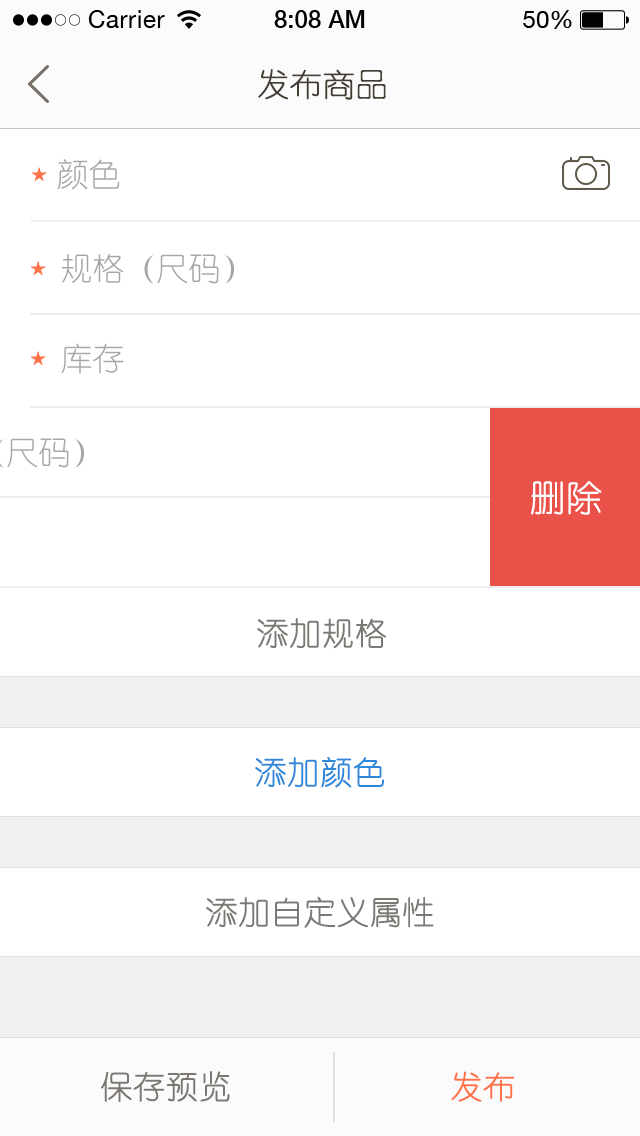
<style>
.page{position:relative;width:640px;height:1136px;background:#ffffff}
.page>*{position:absolute;margin:0}
.t1{font:32px "YouYuan";color:#433d33;text-transform:uppercase;font-weight:bold}
.t2{font:32px "YouYuan";color:#a7a6a3;text-transform:uppercase}
.t3{font:36px "YouYuan";color:#ffffff;text-transform:uppercase;font-weight:bold}
.t4{font:32px "YouYuan";color:#7b7973;text-transform:uppercase;font-weight:bold}
.t5{font:32px "YouYuan";color:#2f88da;text-transform:uppercase;font-weight:bold}
.t6{font:32px "YouYuan";color:#7a7772;text-transform:uppercase;font-weight:bold}
.t7{font:32px "YouYuan";color:#ff7248;text-transform:uppercase;font-weight:bold}
</style>
<div class="page">
<p class="t1" style="left:258px;top:69px;width:128px;height:31px">发布商品</p>
<p class="t2" style="left:57px;top:159px;width:63px;height:31px">颜色</p>
<p class="t2" style="left:61px;top:254px;width:173px;height:30px">规格（尺码）</p>
<p class="t2" style="left:61px;top:343px;width:63px;height:31px">库存</p>
<p class="t3" style="left:531px;top:481px;width:71px;height:34px">删除</p>
<p class="t4" style="left:257px;top:618px;width:129px;height:31px">添加规格</p>
<p class="t5" style="left:255px;top:757px;width:129px;height:31px">添加颜色</p>
<p class="t4" style="left:206px;top:896px;width:228px;height:32px">添加自定义属性</p>
<p class="t6" style="left:101px;top:1071px;width:129px;height:31px">保存预览</p>
<p class="t7" style="left:451px;top:1071px;width:64px;height:31px">发布</p>
</div>
